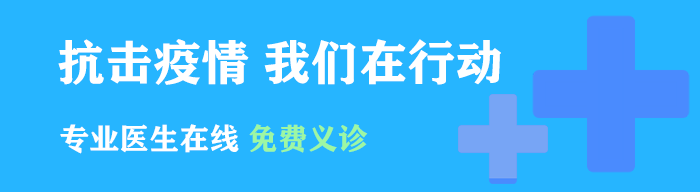
<style>
.page{position:relative;width:700px;height:192px;background:#26b5ff}
.page>*{position:absolute;margin:0}
.t1{font:48px "FZCHSJW--GB1-0";color:#ffffff}
.t2{font:30px "FZCHSJW--GB1-0";color:#ffffff}
.t3{font:30px "FZCHSJW--GB1-0";color:#9df7a3}
</style>
<div class="page">
<p class="t1" style="left:58px;top:39px;width:443px;height:46px">抗击疫情 我们在行动</p>
<p class="t2" style="left:60px;top:124px;width:308px;height:30px">专业医生在线 <span class="t3">免费义诊</span></p>
</div>
